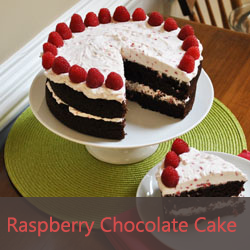
<style>
.page{position:relative;width:250px;height:250px}
.page>*{position:absolute;margin:0}
.t1{font:20px "MicrosoftTaiLe";color:#d64d4c}
</style>
<div class="page">
<p class="t1" style="left:8px;top:216px;width:229px;height:21px">Raspberry Chocolate Cake</p>
</div>
